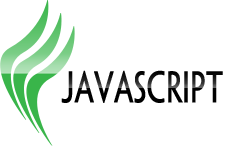
<style>
.page{position:relative;width:250px;height:146px;background:#ffffff}
.page>*{position:absolute;margin:0}
.t1{font:39.5px "UTM-Penumbra";color:#000000;font-weight:bold;scale:0.72 1}
</style>
<div class="page">
<p class="t1" style="left:61px;top:70px;width:162px;height:33px">JavaScript</p>
</div>
